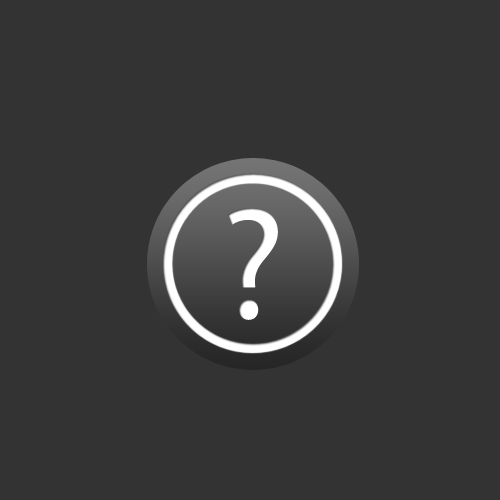
<style>
.page{position:relative;width:500px;height:500px;background:#333333}
.page>*{position:absolute;margin:0}
.t1{font:160px "MyriadPro-Regular";color:#ffffff}
</style>
<div class="page">
<p class="t1" style="left:228px;top:208px;width:50px;height:112px">?</p>
</div>
